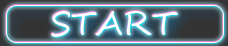
<style>
.page{position:relative;width:228px;height:46px}
.page>*{position:absolute;margin:0}
.t1{font:33.3px "SegoeScript";color:#ffffff}
</style>
<div class="page">
<p class="t1" style="left:51px;top:11px;width:127px;height:26px">START</p>
</div>
